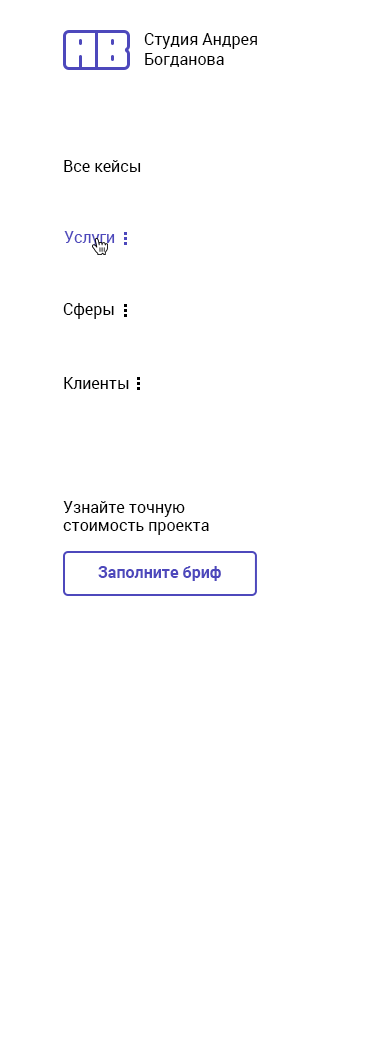
<style>
.page{position:relative;width:370px;height:1058px;background:#ffffff}
.page>*{position:absolute;margin:0}
.t1{font:16px/20px "Roboto-Regular";color:#000000}
.t2{font:16px "Roboto-Regular";color:#000000}
.t3{font:16px "Roboto-Regular";color:#4d48bc}
.t4{font:16px/18px "Roboto-Regular";color:#000000}
.t5{font:16px "Roboto-Bold";color:#4d48bc}
</style>
<div class="page">
<p class="t1" style="left:144px;top:33px;width:113px;height:34px">Студия Андрея <br>Богданова</p>
<p class="t2" style="left:64px;top:160px;width:77px;height:12px">Все кейсы</p>
<p class="t3" style="left:64px;top:231px;width:51px;height:16px">Услуги</p>
<p class="t2" style="left:63px;top:303px;width:51px;height:16px">Сферы</p>
<p class="t2" style="left:64px;top:377px;width:65px;height:12px">Клиенты</p>
<p class="t4" style="left:63px;top:501px;width:146px;height:34px">Узнайте точную <br>стоимость проекта</p>
<p class="t5" style="left:98px;top:566px;width:123px;height:15px">Заполните бриф</p>
</div>
